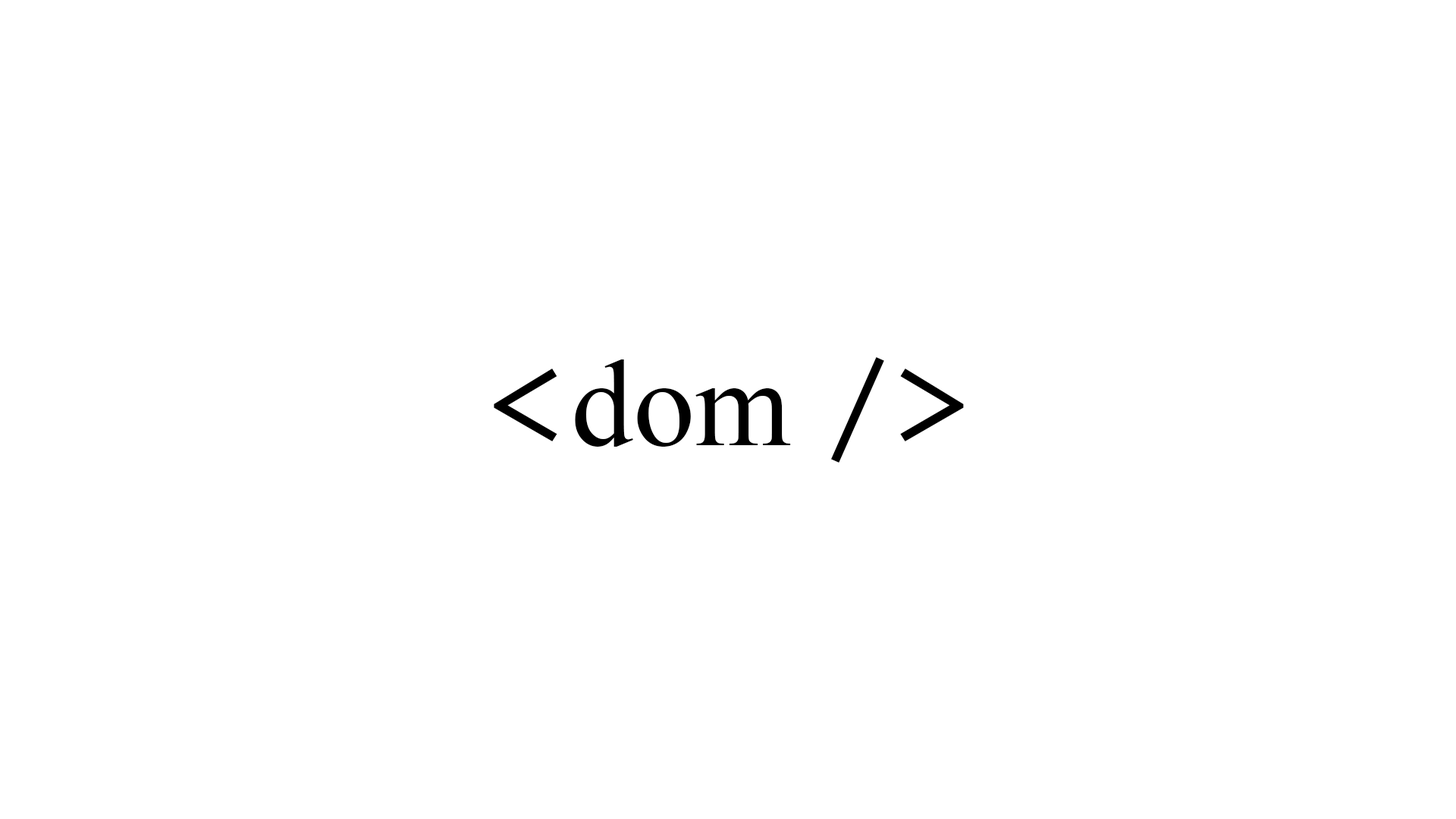
<style>
.page{position:relative;width:1456px;height:819px;background:#ffffff}
.page>*{position:absolute;margin:0}
.t1{font:123.6px "TimesNewRomanPSMT";color:#000000}
.t2{font:123.6px "PTMono-Regular";color:#000000}
</style>
<div class="page">
<p class="t1" style="left:494px;top:357px;width:470px;height:106px"><span class="t2">&lt;</span>dom <span class="t2">/&gt;</span></p>
</div>
